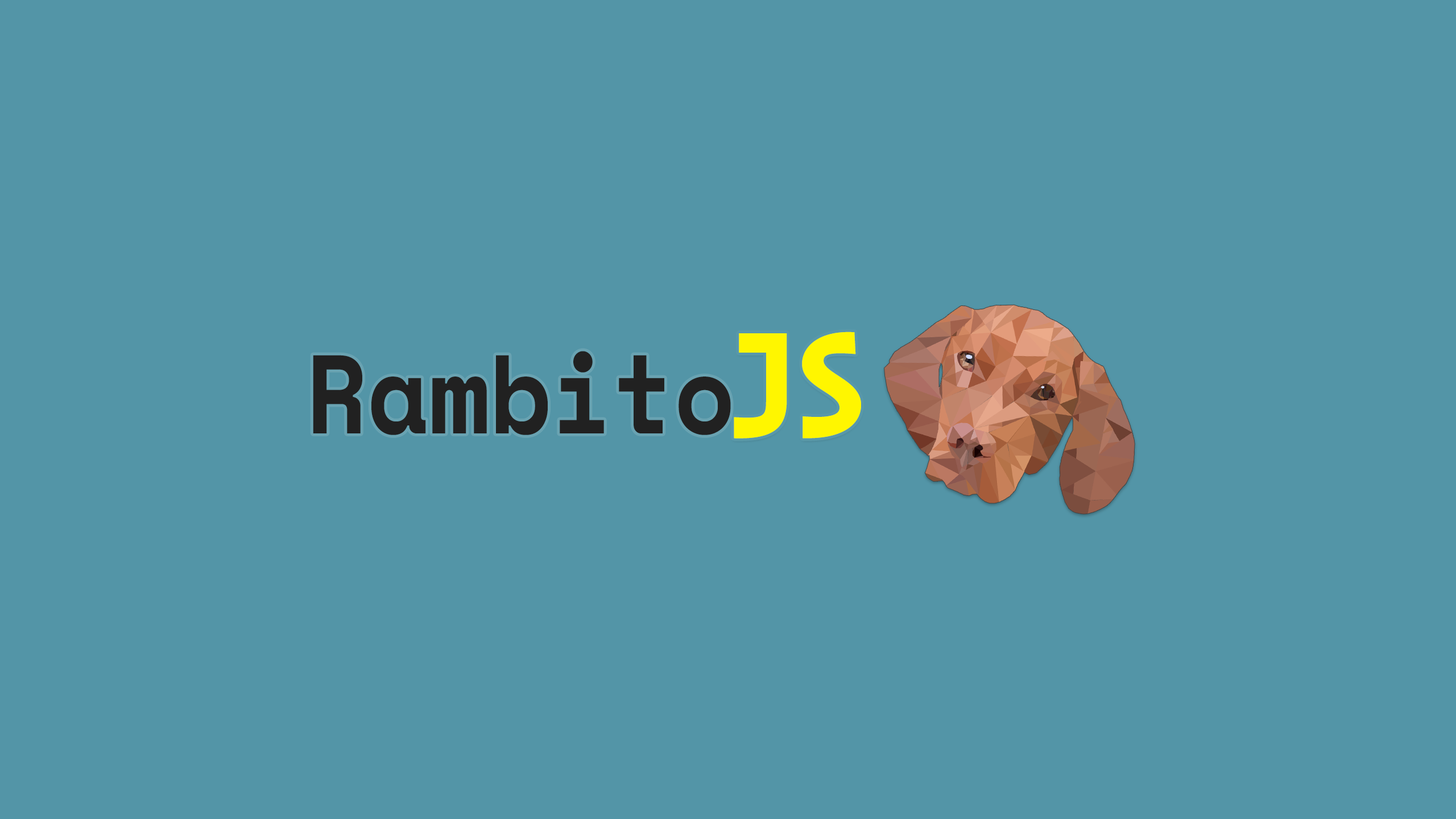
<style>
.page{position:relative;width:1456px;height:819px;background:#5395a7}
.page>*{position:absolute;margin:0}
.t1{font:166.8px "OperatorMono-Bold";letter-spacing:-0.06em;color:#fff600;scale:0.84 1}
.t2{font:111.4px "SpaceMono-Bold";color:#212121;scale:0.9 1}
</style>
<div class="page">
<p class="t1" style="left:734px;top:332px;width:127px;height:107px">JS</p>
<p class="t2" style="left:313px;top:351px;width:418px;height:84px">Rambito</p>
</div>
